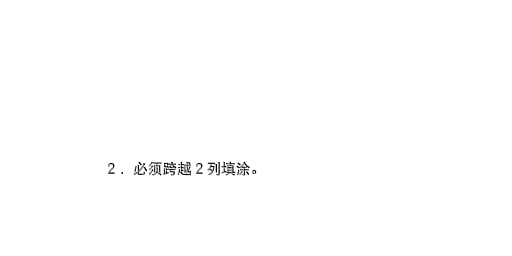
<style>
.page{position:relative;width:512px;height:256px;background:#ffffff}
.page>*{position:absolute;margin:0}
.t1{font:14.7px "DFPHeiW5-GB"}
</style>
<div class="page">
<p class="t1" style="left:107px;top:161px;width:150px;height:15px">２．必须跨越２列填涂。</p>
</div>
